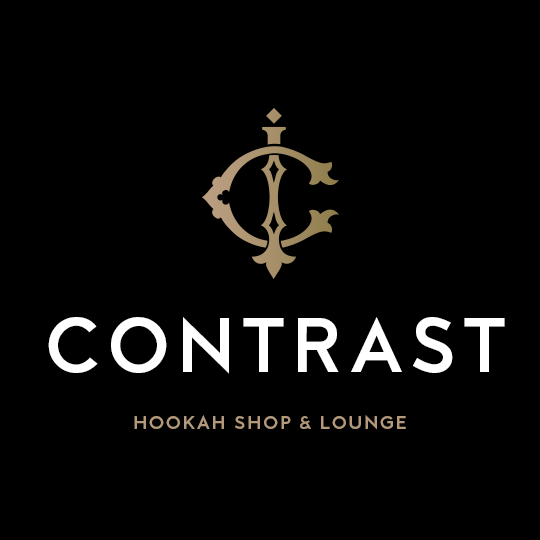
<style>
.page{position:relative;width:540px;height:540px;background:#000000}
.page>*{position:absolute;margin:0}
.t1{font:77.1px "MTTMilano-Bold";letter-spacing:0.1em;color:#ffffff;text-transform:uppercase}
.t2{font:18.8px "MTTMilano-Bold";letter-spacing:0.1em;color:#b49a7a;text-transform:uppercase}
</style>
<div class="page">
<p class="t1" style="left:48px;top:317px;width:457px;height:57px">contrast</p>
<p class="t2" style="left:134px;top:415px;width:272px;height:15px">hookah shop &amp; lounge</p>
</div>
